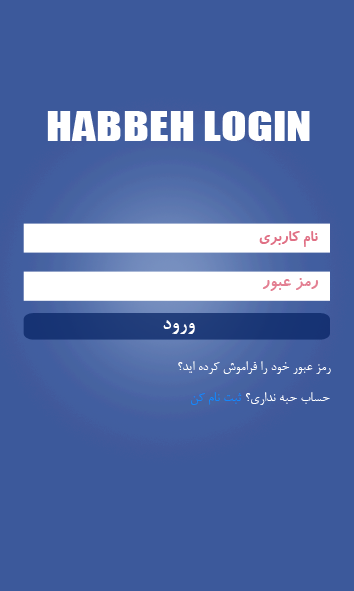
<style>
.page{position:relative;width:354px;height:591px;background:#3c599b}
.page>*{position:absolute;margin:0}
.t1{font:37.5px "Impact";color:#ffffff;scale:1.27 1}
.t2{font:16.7px "BKoodakBold";color:#e07085}
.t3{font:18.7px "BKoodakBold";color:#e37f92}
.t4{font:20.9px "BNazaninBold";color:#ffffff}
.t5{font:14.6px "BNazanin";color:#ffffff}
.t6{font:14.6px "BNazanin";color:#1388ff}
</style>
<div class="page">
<p class="t1" style="left:47px;top:111px;width:263px;height:30px">HABBEH LOGIN</p>
<p class="t2" style="left:259px;top:231px;width:59px;height:16px">نام کاربري</p>
<p class="t3" style="left:262px;top:278px;width:57px;height:13px">رمز عبور</p>
<p class="t4" style="left:163px;top:320px;width:32px;height:14px">ورود</p>
<p class="t5" style="left:178px;top:361px;width:153px;height:13px">رمز عبور خود را فراموش کرده ايد؟</p>
<p class="t5" style="left:191px;top:392px;width:139px;height:13px">حساب حبه نداري؟ <span class="t6">ثبت نام کن</span></p>
</div>
